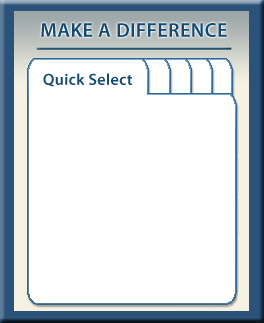
<style>
.page{position:relative;width:264px;height:323px;background:#ffffff}
.page>*{position:absolute;margin:0}
.t1{font:20px "MyriadPro-Semibold";letter-spacing:0.025em;color:#124a71}
.t2{font:16px "MyriadPro-Semibold";letter-spacing:0.025em;color:#124a71}
</style>
<div class="page">
<p class="t1" style="left:41px;top:23px;width:186px;height:14px">MAKE A DIFFERENCE</p>
<p class="t2" style="left:43px;top:73px;width:89px;height:14px">Quick Select</p>
</div>
